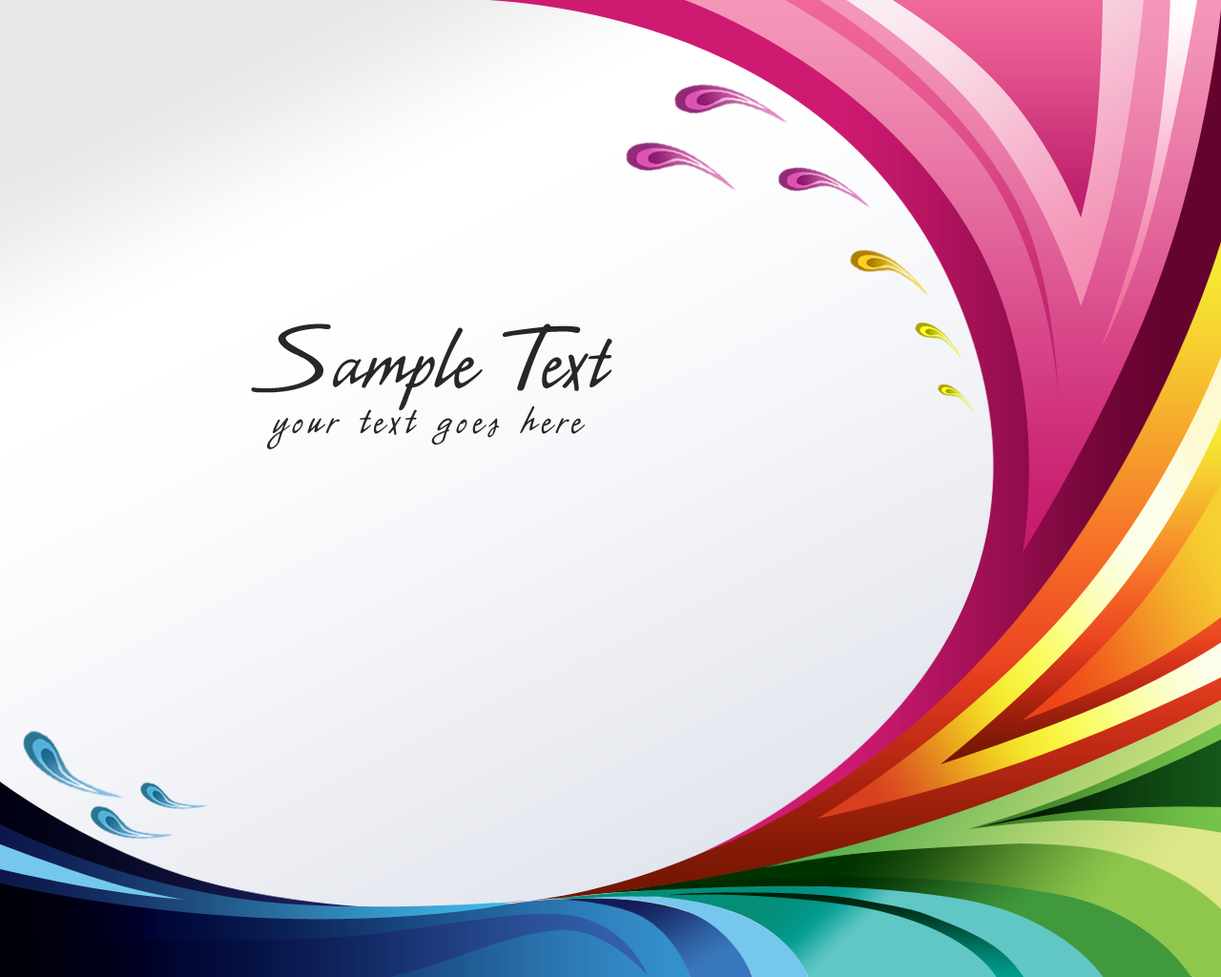
<style>
.page{position:relative;width:1221px;height:977px}
.page>*{position:absolute;margin:0}
.t1{font:95.4px "CACLeslie";color:#272727}
.t2{font:45.8px "CACLeslie";letter-spacing:0.1em;color:#272727}
</style>
<div class="page">
<p class="t1" style="left:251px;top:323px;width:361px;height:87px">Sample Text</p>
<p class="t2" style="left:267px;top:405px;width:318px;height:44px">your text goes here</p>
</div>
